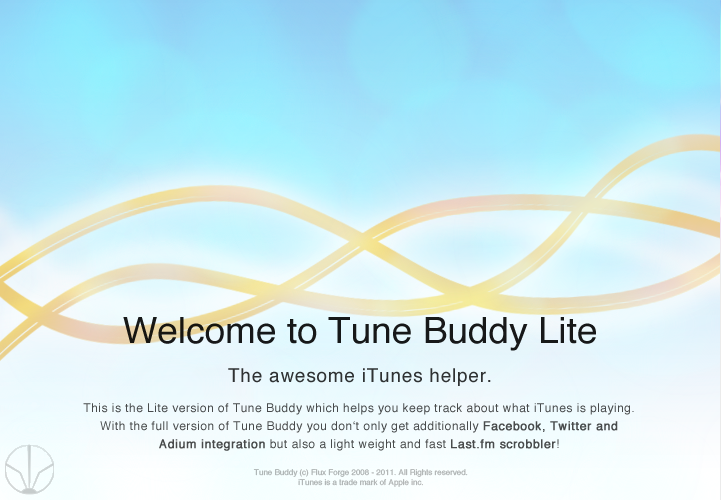
<style>
.page{position:relative;width:721px;height:500px}
.page>*{position:absolute;margin:0}
.t1{font:36px "Helvetica";color:#171819}
.t2{font:19px "Helvetica";letter-spacing:0.04em;color:#2e3233}
.t3{font:12px/18px "Helvetica";letter-spacing:0.04em;color:#484b4c}
.t4{font:12px/18px "Helvetica";letter-spacing:0.04em;color:#484b4c;font-weight:bold}
.t5{font:8px "Helvetica"}
</style>
<div class="page">
<p class="t1" style="left:123px;top:317px;width:473px;height:34px">Welcome to Tune Buddy Lite</p>
<p class="t2" style="left:228px;top:368px;width:263px;height:18px">The awesome iTunes helper.</p>
<p class="t3" style="left:83px;top:403px;width:551px;height:48px;text-align:center">This is the Lite version of Tune Buddy which helps you keep track about what iTunes is playing. <br>With the full version of Tune Buddy you don‘t only get additionally <span class="t4">Facebook, Twitter and <br>Adium integration</span> but also a light weight and fast <span class="t4">Last.fm scrobbler</span>!</p>
<p class="t5" style="left:253px;top:469px;width:215px;height:18px;text-align:center">Tune Buddy (c) Flux Forge 2008 - 2011. All Rights reserved.<br>iTunes is a trade mark of Apple inc.</p>
</div>
